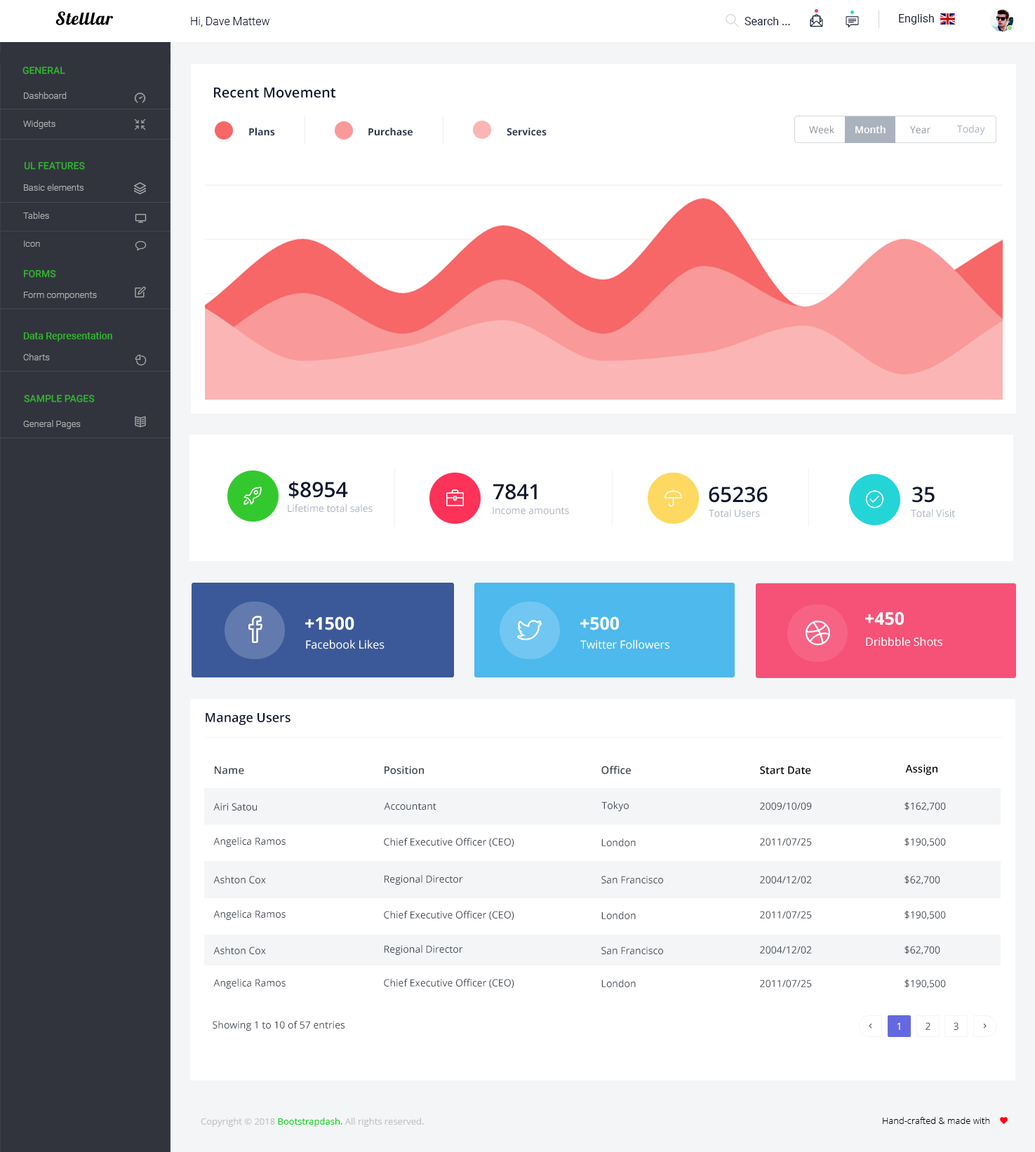
<style>
.page{position:relative;width:1035px;height:1152px;background:#ffffff}
.page>*{position:absolute;margin:0}
.t1{font:11.2px "Roboto-Light";color:#0f1531}
.t2{font:11.2px "Roboto-Regular";color:#0f1531}
.t3{font:9.8px "Roboto-Medium";color:#33c92e;text-transform:uppercase}
.t4{font:14px "OpenSans-SemiBold";color:#0f1531}
.t5{font:9.1px/28.1px "Roboto-Light";color:#aeaeae}
.t6{font:9.8px "OpenSans-Regular";color:#8d9498}
.t7{font:9.8px "OpenSans-SemiBold";color:#ffffff}
.t8{font:9.8px "OpenSans-Regular";color:#aab2bd}
.t9{font:9.8px "OpenSans-Bold";color:#2f3b4c}
.t10{font:9.1px "Roboto-Light";color:#aeaeae}
.t11{font:9.8px "Roboto-Medium";color:#33c92e}
.t12{font:21px "OpenSans-SemiBold";color:#0f1531}
.t13{font:17.5px "OpenSans-Bold";color:#ffffff}
.t14{font:11.2px "OpenSans-Regular";color:#ffffff}
.t15{font:12.6px "OpenSans-SemiBold";color:#0f1531}
.t16{font:10.5px "OpenSans-SemiBold";color:#434a54}
.t17{font:10.5px "OpenSans-SemiBold";color:#000000}
.t18{font:9.8px "OpenSans-Regular";color:#434a54}
.t19{font:9.8px "OpenSans-Regular";color:#ffffff}
.t20{font:9.1px "OpenSans-Regular";color:#c2c2c2}
.t21{font:9.1px "OpenSans-Regular";color:#08d419}
.t22{font:9.1px "OpenSans-Light";color:#000000}
</style>
<div class="page">
<p class="t1" style="left:191px;top:17px;width:79px;height:10px">Hi, Dave Mattew</p>
<p class="t2" style="left:744px;top:17px;width:46px;height:8px">Search ...</p>
<p class="t2" style="left:899px;top:14px;width:35px;height:11px">English</p>
<p class="t3" style="left:22px;top:67px;width:43px;height:7px;opacity:0.8">General</p>
<p class="t4" style="left:214px;top:87px;width:121px;height:11px">Recent Movement</p>
<p class="t5" style="left:23px;top:92px;width:44px;height:37px">Dashboard<br>Widgets</p>
<p class="t6" style="left:809px;top:126px;width:25px;height:8px">Week</p>
<p class="t7" style="left:855px;top:126px;width:30px;height:7px">Month</p>
<p class="t8" style="left:957px;top:125px;width:28px;height:10px">Today</p>
<p class="t9" style="left:249px;top:128px;width:26px;height:8px">Plans</p>
<p class="t9" style="left:368px;top:128px;width:44px;height:8px">Purchase</p>
<p class="t9" style="left:506px;top:128px;width:40px;height:8px">Services</p>
<p class="t6" style="left:910px;top:126px;width:20px;height:8px">Year</p>
<p class="t3" style="left:25px;top:162px;width:60px;height:8px;opacity:0.8">Ul Features</p>
<p class="t5" style="left:23px;top:184px;width:60px;height:63px">Basic elements<br>Tables<br>Icon</p>
<p class="t3" style="left:24px;top:270px;width:32px;height:8px;opacity:0.8">Forms</p>
<p class="t10" style="left:24px;top:292px;width:73px;height:8px">Form components</p>
<p class="t11" style="left:23px;top:332px;width:89px;height:10px;opacity:0.8">Data Representation</p>
<p class="t10" style="left:23px;top:354px;width:27px;height:7px">Charts</p>
<p class="t3" style="left:24px;top:395px;width:71px;height:8px;opacity:0.8">SAMPLE PAGES</p>
<p class="t10" style="left:23px;top:420px;width:58px;height:9px">General Pages</p>
<p class="t12" style="left:288px;top:481px;width:60px;height:18px">$8954</p>
<p class="t12" style="left:493px;top:484px;width:44px;height:16px">7841</p>
<p class="t12" style="left:708px;top:487px;width:59px;height:16px">65236</p>
<p class="t12" style="left:912px;top:487px;width:22px;height:16px">35</p>
<p class="t8" style="left:288px;top:504px;width:84px;height:9px">Lifetime total sales</p>
<p class="t8" style="left:492px;top:507px;width:77px;height:8px">Income amounts</p>
<p class="t8" style="left:708px;top:509px;width:52px;height:9px">Total Users</p>
<p class="t8" style="left:910px;top:509px;width:45px;height:9px">Total Visit</p>
<p class="t13" style="left:305px;top:617px;width:49px;height:14px">+1500</p>
<p class="t13" style="left:580px;top:617px;width:39px;height:14px">+500</p>
<p class="t13" style="left:865px;top:612px;width:38px;height:14px">+450</p>
<p class="t14" style="left:306px;top:640px;width:78px;height:10px">Facebook Likes</p>
<p class="t14" style="left:580px;top:640px;width:89px;height:10px">Twitter Followers</p>
<p class="t14" style="left:866px;top:637px;width:76px;height:10px">Dribbble Shots</p>
<p class="t15" style="left:206px;top:713px;width:84px;height:12px">Manage Users</p>
<p class="t16" style="left:215px;top:767px;width:29px;height:7px">Name</p>
<p class="t16" style="left:384px;top:766px;width:40px;height:8px">Position</p>
<p class="t16" style="left:601px;top:766px;width:30px;height:8px">Office</p>
<p class="t17" style="left:760px;top:767px;width:51px;height:7px">Start Date</p>
<p class="t17" style="left:905px;top:765px;width:32px;height:11px">Assign</p>
<p class="t18" style="left:213px;top:803px;width:44px;height:8px">Airi Satou</p>
<p class="t18" style="left:384px;top:802px;width:52px;height:8px">Accountant</p>
<p class="t18" style="left:601px;top:802px;width:28px;height:10px">Tokyo</p>
<p class="t18" style="left:760px;top:802px;width:52px;height:8px">2009/10/09</p>
<p class="t18" style="left:904px;top:802px;width:42px;height:10px">$162,700</p>
<p class="t18" style="left:213px;top:838px;width:72px;height:9px">Angelica Ramos</p>
<p class="t18" style="left:384px;top:838px;width:130px;height:9px">Chief Executive Officer (CEO)</p>
<p class="t18" style="left:601px;top:839px;width:35px;height:8px">London</p>
<p class="t18" style="left:760px;top:838px;width:52px;height:8px">2011/07/25</p>
<p class="t18" style="left:904px;top:838px;width:42px;height:9px">$190,500</p>
<p class="t18" style="left:213px;top:876px;width:53px;height:8px">Ashton Cox</p>
<p class="t18" style="left:384px;top:875px;width:79px;height:10px">Regional Director</p>
<p class="t18" style="left:601px;top:876px;width:62px;height:8px">San Francisco</p>
<p class="t18" style="left:760px;top:876px;width:52px;height:8px">2004/12/02</p>
<p class="t18" style="left:904px;top:876px;width:36px;height:9px">$62,700</p>
<p class="t18" style="left:213px;top:910px;width:72px;height:10px">Angelica Ramos</p>
<p class="t18" style="left:384px;top:911px;width:130px;height:9px">Chief Executive Officer (CEO)</p>
<p class="t18" style="left:601px;top:912px;width:35px;height:8px">London</p>
<p class="t18" style="left:760px;top:911px;width:52px;height:8px">2011/07/25</p>
<p class="t18" style="left:904px;top:911px;width:42px;height:9px">$190,500</p>
<p class="t18" style="left:213px;top:947px;width:53px;height:8px">Ashton Cox</p>
<p class="t18" style="left:384px;top:946px;width:79px;height:9px">Regional Director</p>
<p class="t18" style="left:601px;top:947px;width:62px;height:8px">San Francisco</p>
<p class="t18" style="left:760px;top:946px;width:52px;height:8px">2004/12/02</p>
<p class="t18" style="left:904px;top:946px;width:36px;height:9px">$62,700</p>
<p class="t18" style="left:213px;top:979px;width:72px;height:10px">Angelica Ramos</p>
<p class="t18" style="left:384px;top:979px;width:130px;height:9px">Chief Executive Officer (CEO)</p>
<p class="t18" style="left:601px;top:980px;width:35px;height:8px">London</p>
<p class="t18" style="left:760px;top:980px;width:52px;height:8px">2011/07/25</p>
<p class="t18" style="left:904px;top:980px;width:42px;height:9px">$190,500</p>
<p class="t18" style="left:213px;top:1021px;width:131px;height:10px">Showing 1 to 10 of 57 entries</p>
<p class="t19" style="left:897px;top:1023px;width:3px;height:7px">1</p>
<p class="t18" style="left:925px;top:1023px;width:5px;height:7px">2</p>
<p class="t18" style="left:953px;top:1023px;width:5px;height:7px">3</p>
<p class="t20" style="left:201px;top:1118px;width:223px;height:9px">Copyright © 2018<span class="t21"> Bootstrapdash.</span> All rights reserved.</p>
<p class="t22" style="left:882px;top:1117px;width:108px;height:7px">Hand-crafted &amp; made with</p>
</div>
